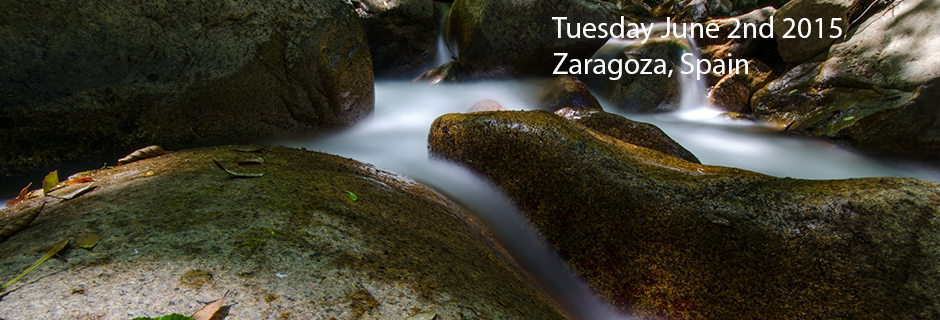
<style>
.page{position:relative;width:940px;height:320px}
.page>*{position:absolute;margin:0}
.t1{font:30px "MyriadPro-Regular";color:#fdfdfd}
</style>
<div class="page">
<p class="t1" style="left:552px;top:16px;width:290px;height:64px">Tuesday June 2nd 2015<br>Zaragoza, Spain</p>
</div>
